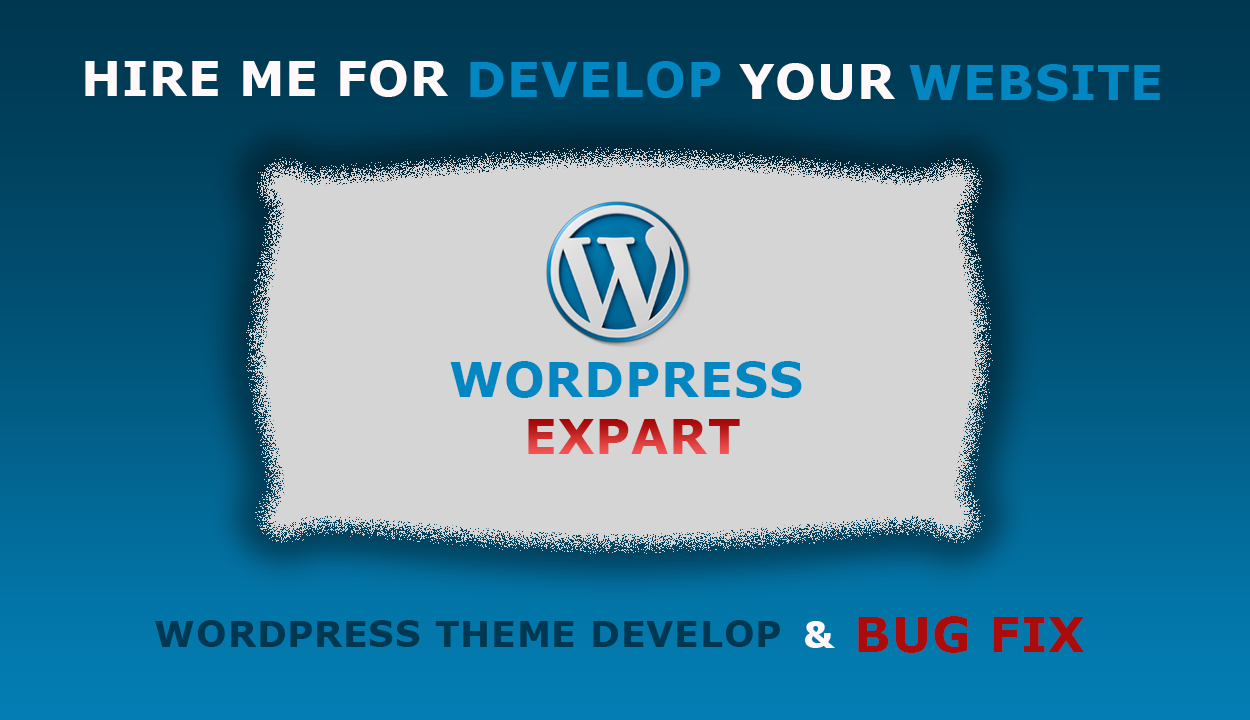
<style>
.page{position:relative;width:1250px;height:720px;background:#d5d5d5}
.page>*{position:absolute;margin:0}
.t1{font:48px "Verdana-Bold";letter-spacing:0.02em;color:#fff9f9;text-transform:uppercase}
.t2{font:48px "Verdana-Bold";letter-spacing:0.02em;color:#0287c2;text-transform:uppercase}
.t3{font:48px "Verdana-Bold";letter-spacing:0.02em;text-transform:uppercase}
.t4{font:48px "Verdana-Bold";letter-spacing:0.02em;color:#aa0b0b;text-transform:uppercase}
.t5{font:36px "Verdana-Bold";letter-spacing:0.02em;color:#003851;text-transform:uppercase}
.t6{font:36px "Verdana-Bold";letter-spacing:0.02em;color:#fff9f9;text-transform:uppercase}
</style>
<div class="page">
<p class="t1" style="left:85px;top:60px;width:363px;height:37px">hire me for</p>
<p class="t2" style="left:470px;top:61px;width:251px;height:37px">develop</p>
<p class="t1" style="left:739px;top:63px;width:156px;height:37px">your</p>
<p class="t2" style="left:909px;top:64px;width:251px;height:37px">website</p>
<p class="t2" style="left:450px;top:361px;width:352px;height:37px">wordpress</p>
<p class="t3" style="left:528px;top:419px;width:212px;height:35px">expart</p>
<p class="t4" style="left:858px;top:616px;width:226px;height:37px">bug fix</p>
<p class="t5" style="left:155px;top:620px;width:625px;height:27px">wordpress theme develop</p>
<p class="t6" style="left:805px;top:621px;width:30px;height:27px">&amp;</p>
</div>
